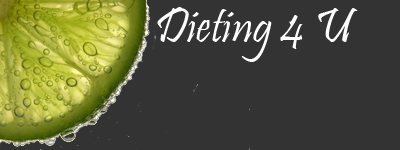
<style>
.page{position:relative;width:400px;height:150px;background:#333333}
.page>*{position:absolute;margin:0}
.t1{font:50px "Pristina-Regular";color:#fffefe}
</style>
<div class="page">
<p class="t1" style="left:157px;top:7px;width:201px;height:55px">Dieting 4 U</p>
</div>
